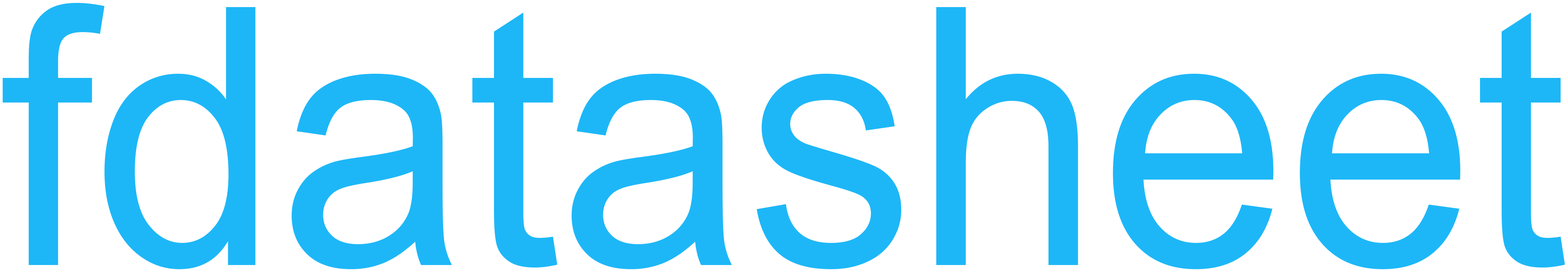
<style>
.page{position:relative;width:1568px;height:270px;background:#ffffff}
.page>*{position:absolute;margin:0}
.t1{font:360.9px "ArialMT";color:#1db7f7;scale:0.93 1}
</style>
<div class="page">
<p class="t1" style="left:3px;top:3px;width:1562px;height:267px">fdatasheet</p>
</div>
